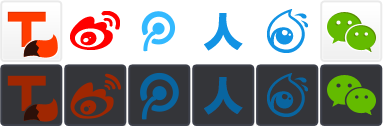
<style>
.page{position:relative;width:384px;height:128px;background:#ffffff}
.page>*{position:absolute;margin:0}
.t1{font:40px "FZLTTHK--GBK1-0";color:#1293e4;font-weight:bold}
</style>
<div class="page">
<p class="t1" style="left:204px;top:13px;width:39px;height:38px">人</p>
</div>
